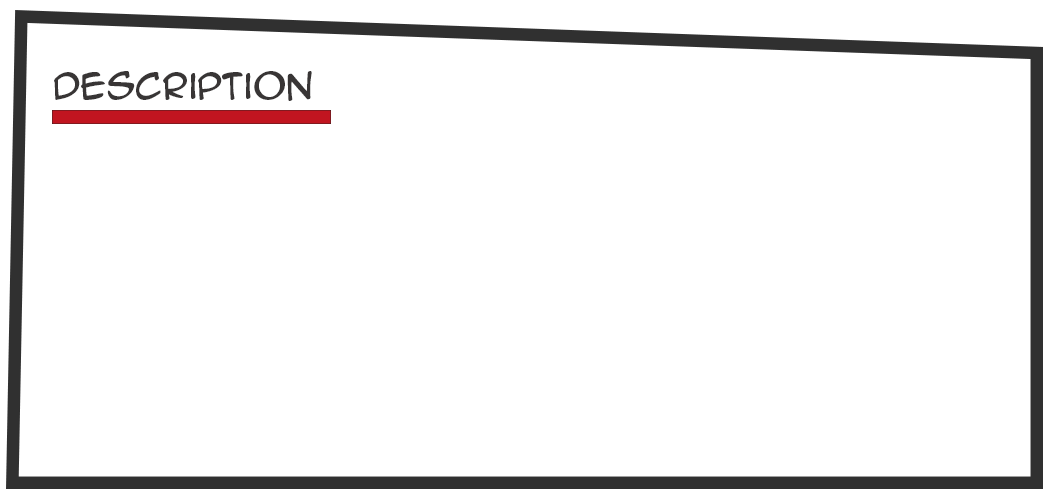
<style>
.page{position:relative;width:1050px;height:500px;background:#ffffff}
.page>*{position:absolute;margin:0}
.t1{font:33.4px "AnimeAce2.0BB";color:#383535}
</style>
<div class="page">
<p class="t1" style="left:54px;top:71px;width:258px;height:30px">Description</p>
</div>
